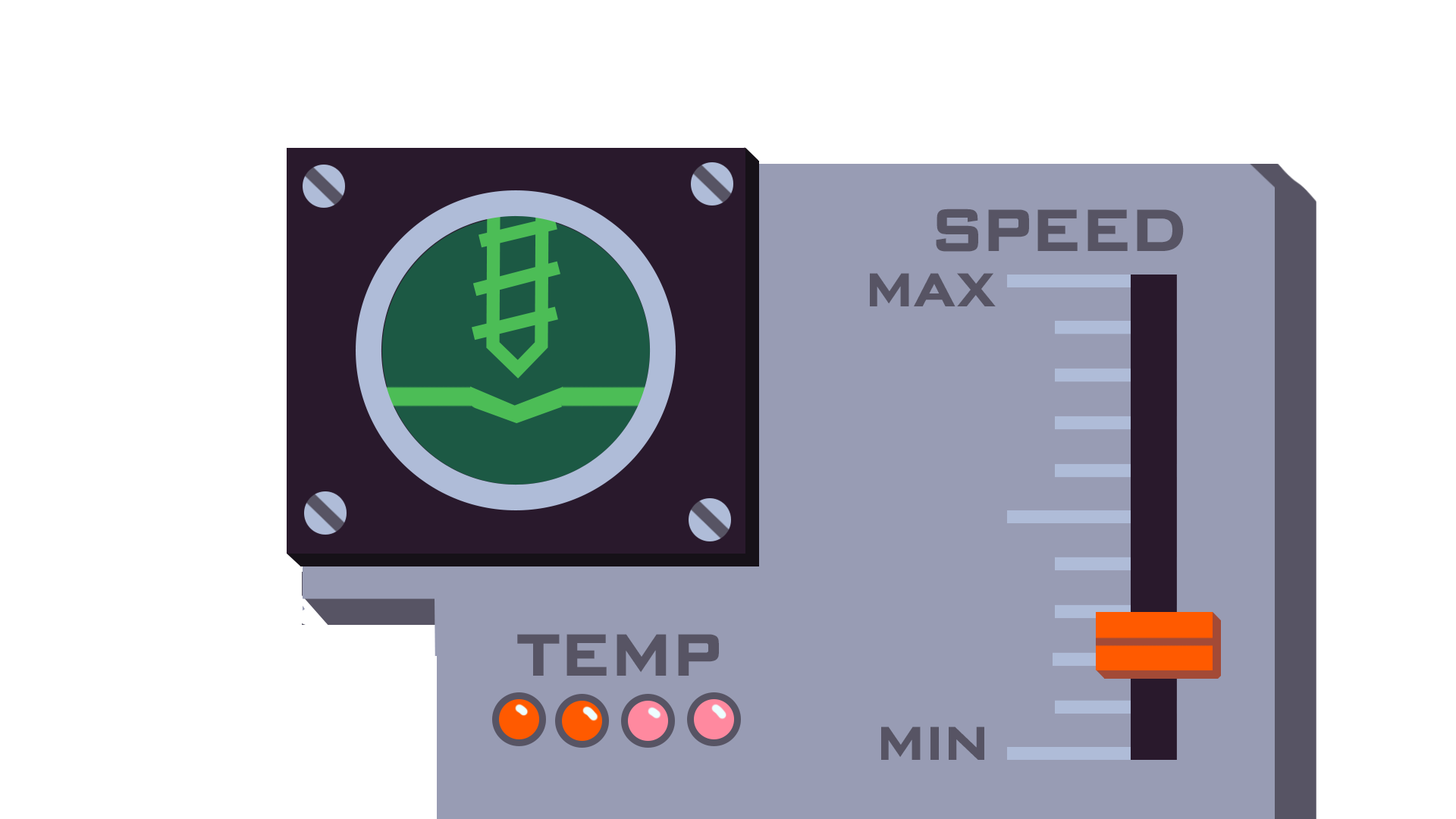
<style>
.page{position:relative;width:1456px;height:819px;background:#ffffff}
.page>*{position:absolute;margin:0}
.t1{font:59.1px "ScienceGothic-SemiBold";letter-spacing:0.02em;color:#575464}
.t2{font:47.1px "ScienceGothic-SemiBold";letter-spacing:0.02em;color:#575464}
</style>
<div class="page">
<p class="t1" style="left:936px;top:209px;width:248px;height:43px">SPEED</p>
<p class="t2" style="left:870px;top:273px;width:126px;height:33px">MAX</p>
<p class="t1" style="left:517px;top:634px;width:202px;height:42px">TEMP</p>
<p class="t2" style="left:881px;top:726px;width:103px;height:34px">MIN</p>
</div>
